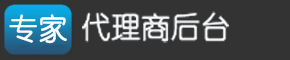
<style>
.page{position:relative;width:290px;height:60px;background:#333333}
.page>*{position:absolute;margin:0}
.t1{font:29.4px "YouYuan";color:#fbfdff;font-weight:bold}
.t2{font:29.6px "YouYuan";color:#fbfdff;font-weight:bold}
</style>
<div class="page">
<p class="t1" style="left:9px;top:14px;width:58px;height:30px">专家</p>
<p class="t2" style="left:82px;top:11px;width:147px;height:32px">代理商后台</p>
</div>
